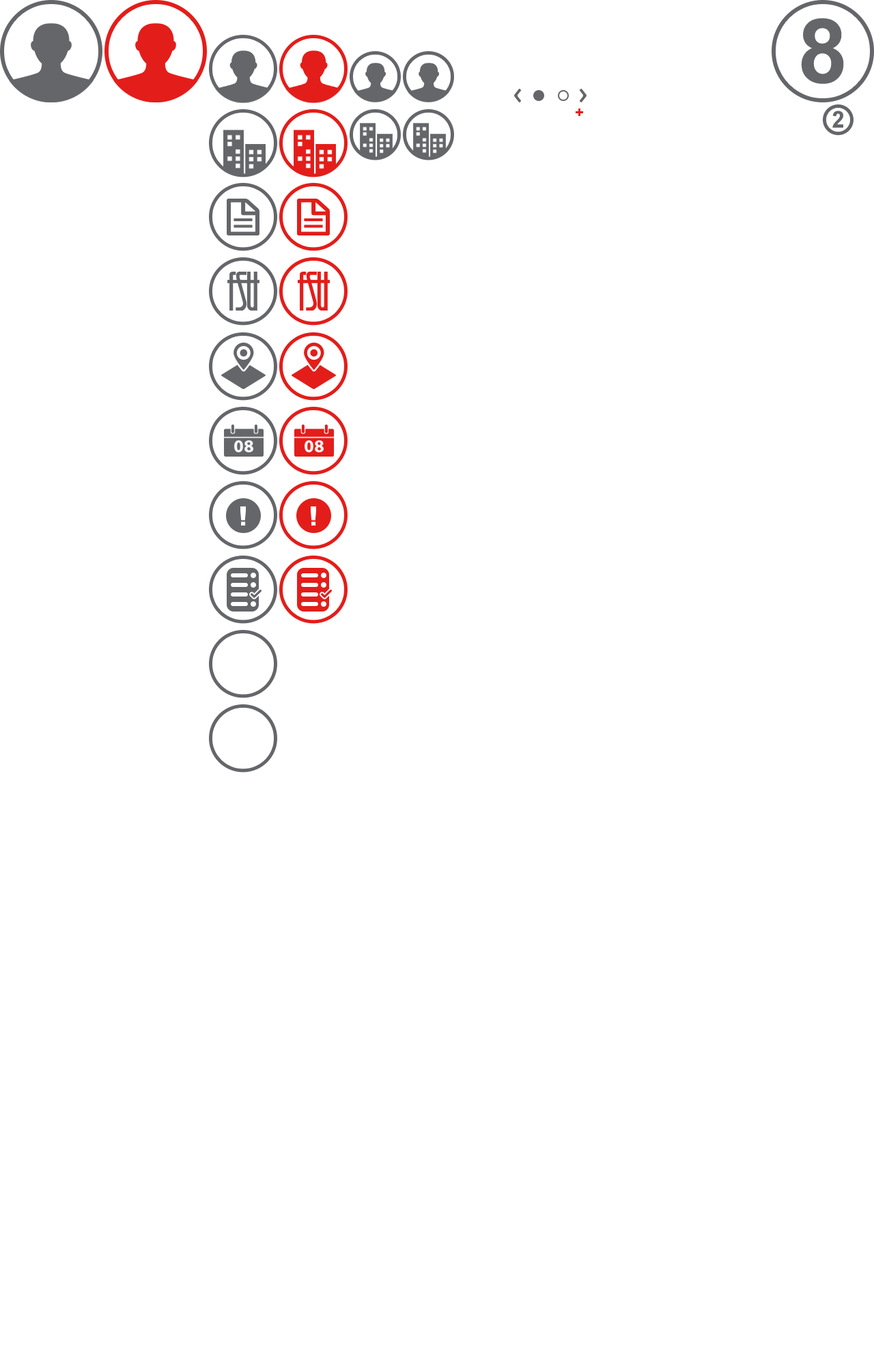
<style>
.page{position:relative;width:874px;height:1365px;background:#ffffff}
.page>*{position:absolute;margin:0}
.t1{font:89px "Arial-BoldMT";color:#65666a}
.t2{font:23.1px "Arial-BoldMT";color:#65666a}
</style>
<div class="page">
<p class="t1" style="left:801px;top:18px;width:43px;height:66px">8</p>
<p class="t2" style="left:832px;top:111px;width:11px;height:17px">2</p>
</div>
